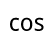
<style>
.page{position:relative;width:53px;height:41px;background:#ffffff}
.page>*{position:absolute;margin:0}
.t1{font:23.7px "DroidSans";color:#000000}
</style>
<div class="page">
<p class="t1" style="left:10px;top:17px;width:34px;height:14px">cos</p>
</div>
